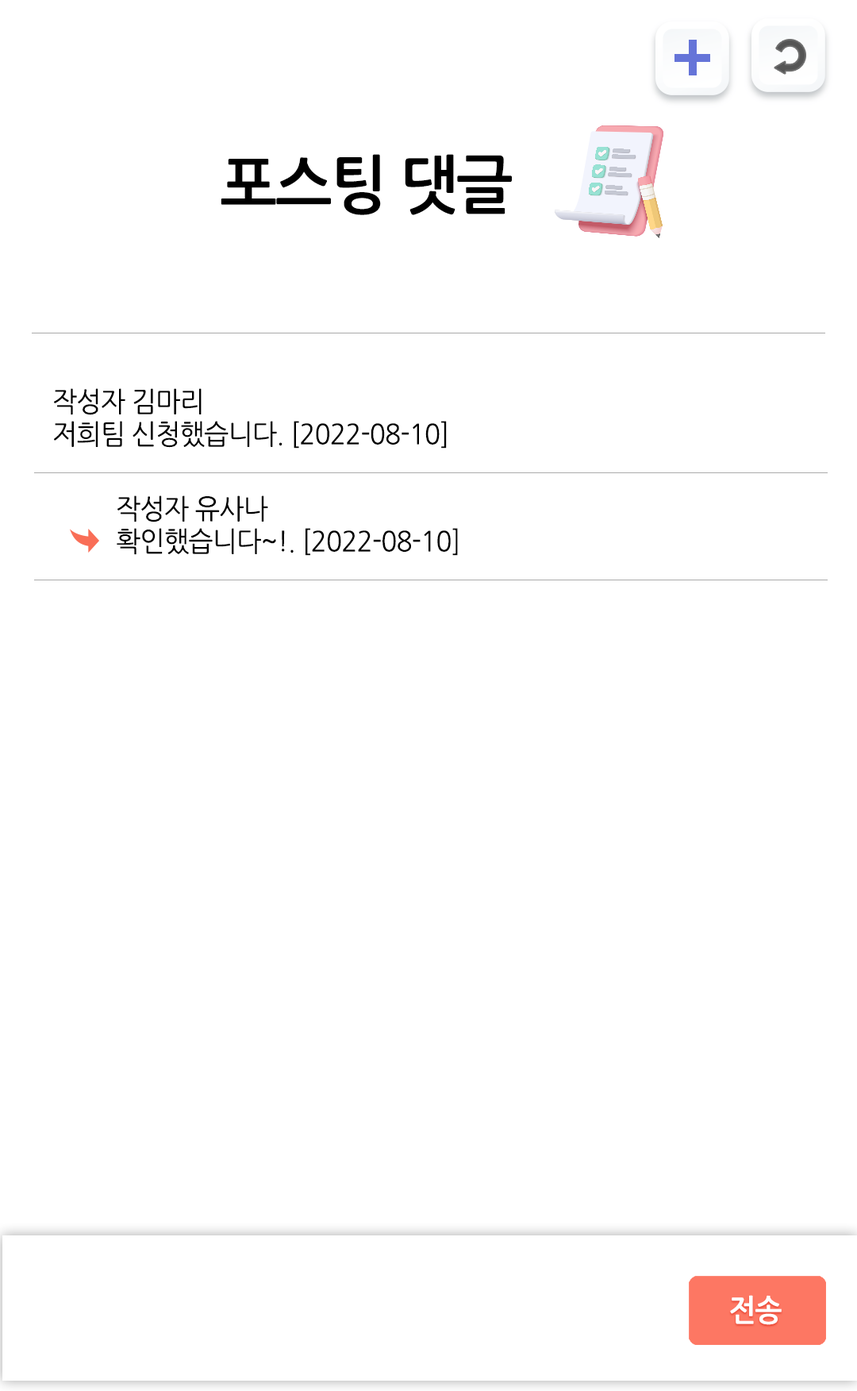
<style>
.page{position:relative;width:857px;height:1391px;background:#ffffff}
.page>*{position:absolute;margin:0}
.t1{font:63.5px "NanumGothicBold";letter-spacing:-0.025em;color:#000000;scale:0.95 1}
.t2{font:27.8px "NanumGothic";letter-spacing:-0.025em;color:#000000;scale:0.95 1}
.t3{font:30.2px "NanumGothicBold";letter-spacing:-0.025em;color:#ffffff;scale:0.95 1}
</style>
<div class="page">
<p class="t1" style="left:221px;top:154px;width:291px;height:61px">포스팅 댓글</p>
<p class="t2" style="left:54px;top:388px;width:148px;height:27px">작성자 김마리</p>
<p class="t2" style="left:54px;top:421px;width:393px;height:28px">저희팀 신청했습니다. [2022-08-10]</p>
<p class="t2" style="left:117px;top:495px;width:151px;height:27px">작성자 유사나</p>
<p class="t2" style="left:117px;top:528px;width:341px;height:28px">확인했습니다~!. [2022-08-10]</p>
<p class="t3" style="left:730px;top:1295px;width:52px;height:30px">전송</p>
</div>
